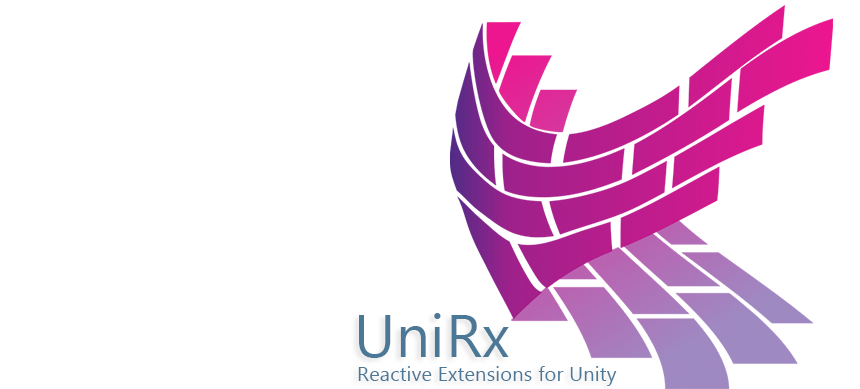
<style>
.page{position:relative;width:860px;height:389px;background:#ffffff}
.page>*{position:absolute;margin:0}
.t1{font:60px "SegoeUI";letter-spacing:0.01em;color:#4c7897}
.t2{font:20px "SegoeUI";letter-spacing:0.01em;color:#4c7897}
</style>
<div class="page">
<p class="t1" style="left:359px;top:313px;width:150px;height:45px">UniRx</p>
<p class="t2" style="left:358px;top:366px;width:259px;height:20px">Reactive Extensions for Unity</p>
</div>
